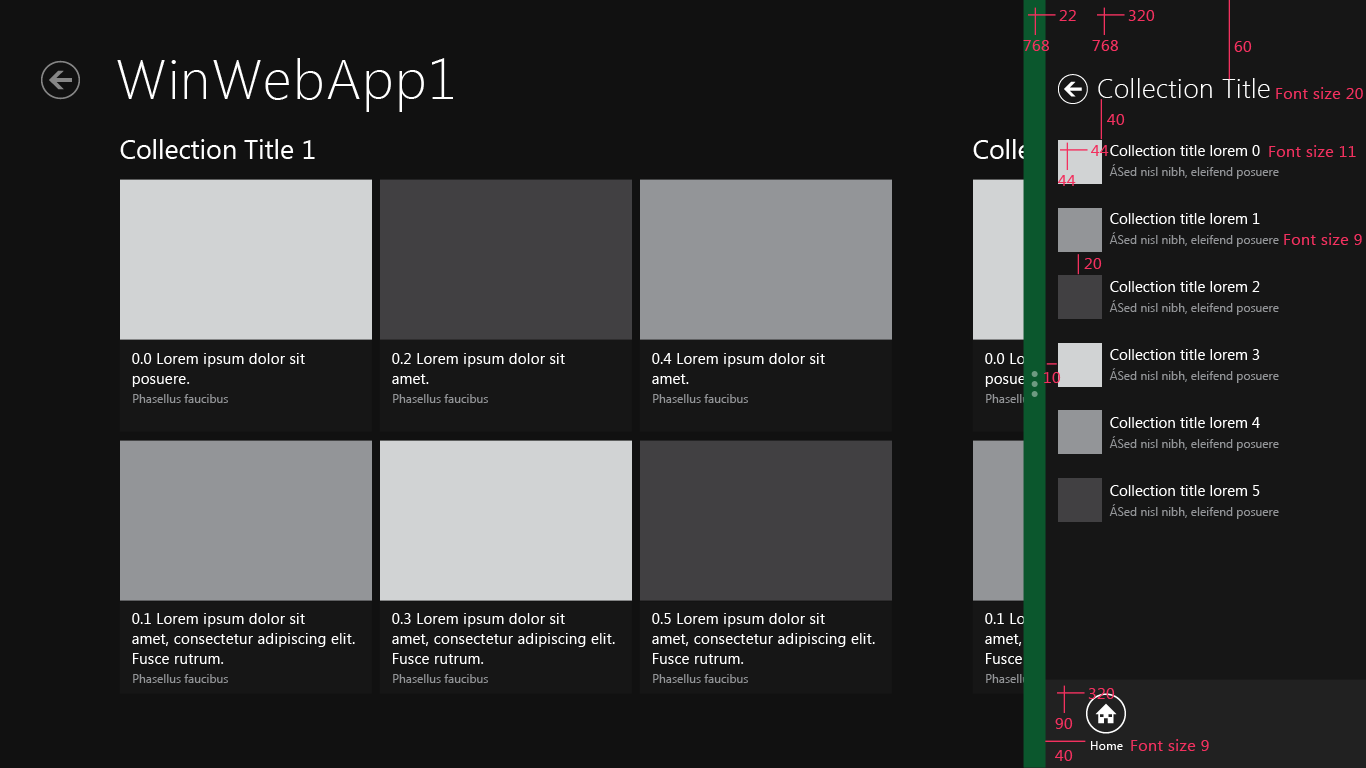
<style>
.page{position:relative;width:1366px;height:768px;background:#111111}
.page>*{position:absolute;margin:0}
.t1{font:16px "SegoeUI";letter-spacing:0.025em;color:#f2315f}
.t2{font:56px "SegoeUI-Light";letter-spacing:0.025em;color:#ffffff}
.t3{font:26.7px "SegoeUI-Light";letter-spacing:0.025em;color:#ffffff}
.t4{font:26.7px "SegoeUI";color:#ffffff}
.t5{font:12px/20px "SegoeUI";color:#939598}
.t6{font:14.7px/68px "SegoeUI";letter-spacing:0.01em;color:#ffffff}
.t7{font:14.7px/48px "SegoeUI";letter-spacing:0.01em;color:#ffffff}
.t8{font:14.7px/20px "SegoeUI";letter-spacing:0.025em;color:#ffffff}
.t9{font:12px "SegoeUI";color:#939598}
.t10{font:12px "SegoeUI"}
.t11{font:14.7px/20px "SegoeUI";letter-spacing:0.025em}
.t12{font:12px "SegoeUI";letter-spacing:0.025em;color:#ffffff}
</style>
<div class="page">
<p class="t1" style="left:1059px;top:10px;width:17px;height:11px">22</p>
<p class="t1" style="left:1128px;top:10px;width:27px;height:11px">320</p>
<p class="t1" style="left:1023px;top:40px;width:26px;height:11px">768</p>
<p class="t1" style="left:1092px;top:40px;width:26px;height:11px">768</p>
<p class="t1" style="left:1234px;top:41px;width:18px;height:11px">60</p>
<p class="t2" style="left:117px;top:58px;width:336px;height:54px">WinWebApp1</p>
<p class="t3" style="left:1098px;top:78px;width:172px;height:20px">Collection Title</p>
<p class="t1" style="left:1276px;top:87px;width:87px;height:12px">Font size 20</p>
<p class="t1" style="left:1107px;top:114px;width:18px;height:11px">40</p>
<p class="t4" style="left:120px;top:139px;width:195px;height:20px">Collection Title 1</p>
<p class="t1" style="left:1091px;top:145px;width:18px;height:11px">44</p>
<p class="t5" style="left:1109px;top:145px;width:170px;height:374px"><span class="t6">Collection title lorem 0<br></span>ÁSed nisl nibh, eleifend posuere <br><span class="t7">Collection title lorem 1<br></span>ÁSed nisl nibh, eleifend posuere<br><span class="t7">Collection title lorem 2<br></span>ÁSed nisl nibh, eleifend posuere<br><span class="t7">Collection title lorem 3<br></span>ÁSed nisl nibh, eleifend posuere<br><span class="t7">Collection title lorem 4<br></span>ÁSed nisl nibh, eleifend posuere<br><span class="t7">Collection title lorem 5<br></span>ÁSed nisl nibh, eleifend posuere</p>
<p class="t1" style="left:1269px;top:145px;width:87px;height:12px">Font size 11</p>
<p class="t1" style="left:1058px;top:175px;width:18px;height:11px">44</p>
<p class="t1" style="left:1284px;top:233px;width:78px;height:12px">Font size 9</p>
<p class="t1" style="left:1084px;top:258px;width:18px;height:11px">20</p>
<p class="t8" style="left:132px;top:353px;width:173px;height:34px">0.0 Lorem ipsum dolor sit <br>posuere.</p>
<p class="t8" style="left:392px;top:353px;width:173px;height:31px">0.2 Lorem ipsum dolor sit <br>amet.</p>
<p class="t8" style="left:652px;top:353px;width:173px;height:31px">0.4 Lorem ipsum dolor sit <br>amet.</p>
<p class="t1" style="left:1044px;top:372px;width:17px;height:11px">10</p>
<p class="t9" style="left:133px;top:394px;width:95px;height:9px">Phasellus faucibus</p>
<p class="t9" style="left:393px;top:394px;width:95px;height:9px">Phasellus faucibus</p>
<p class="t9" style="left:653px;top:394px;width:95px;height:9px">Phasellus faucibus</p>
<p class="t10" style="left:986px;top:394px;width:95px;height:9px">Phasellus faucibus</p>
<p class="t8" style="left:132px;top:613px;width:223px;height:51px">0.1 Lorem ipsum dolor sit <br>amet, consectetur adipiscing elit. <br>Fusce rutrum.</p>
<p class="t8" style="left:392px;top:613px;width:223px;height:51px">0.3 Lorem ipsum dolor sit <br>amet, consectetur adipiscing elit. <br>Fusce rutrum.</p>
<p class="t8" style="left:652px;top:613px;width:223px;height:51px">0.5 Lorem ipsum dolor sit <br>amet, consectetur adipiscing elit. <br>Fusce rutrum.</p>
<p class="t11" style="left:985px;top:613px;width:223px;height:51px">0.1 Lorem ipsum dolor sit <br>amet, consectetur adipiscing elit. <br>Fusce rutrum.</p>
<p class="t9" style="left:133px;top:674px;width:95px;height:9px">Phasellus faucibus</p>
<p class="t9" style="left:393px;top:674px;width:95px;height:9px">Phasellus faucibus</p>
<p class="t9" style="left:653px;top:674px;width:95px;height:9px">Phasellus faucibus</p>
<p class="t10" style="left:986px;top:674px;width:95px;height:9px">Phasellus faucibus</p>
<p class="t1" style="left:1088px;top:688px;width:27px;height:11px">320</p>
<p class="t1" style="left:1055px;top:718px;width:18px;height:11px">90</p>
<p class="t1" style="left:1055px;top:750px;width:18px;height:11px">40</p>
<p class="t12" style="left:1091px;top:741px;width:32px;height:9px">Home</p>
<p class="t1" style="left:1131px;top:739px;width:78px;height:12px">Font size 9</p>
</div>
